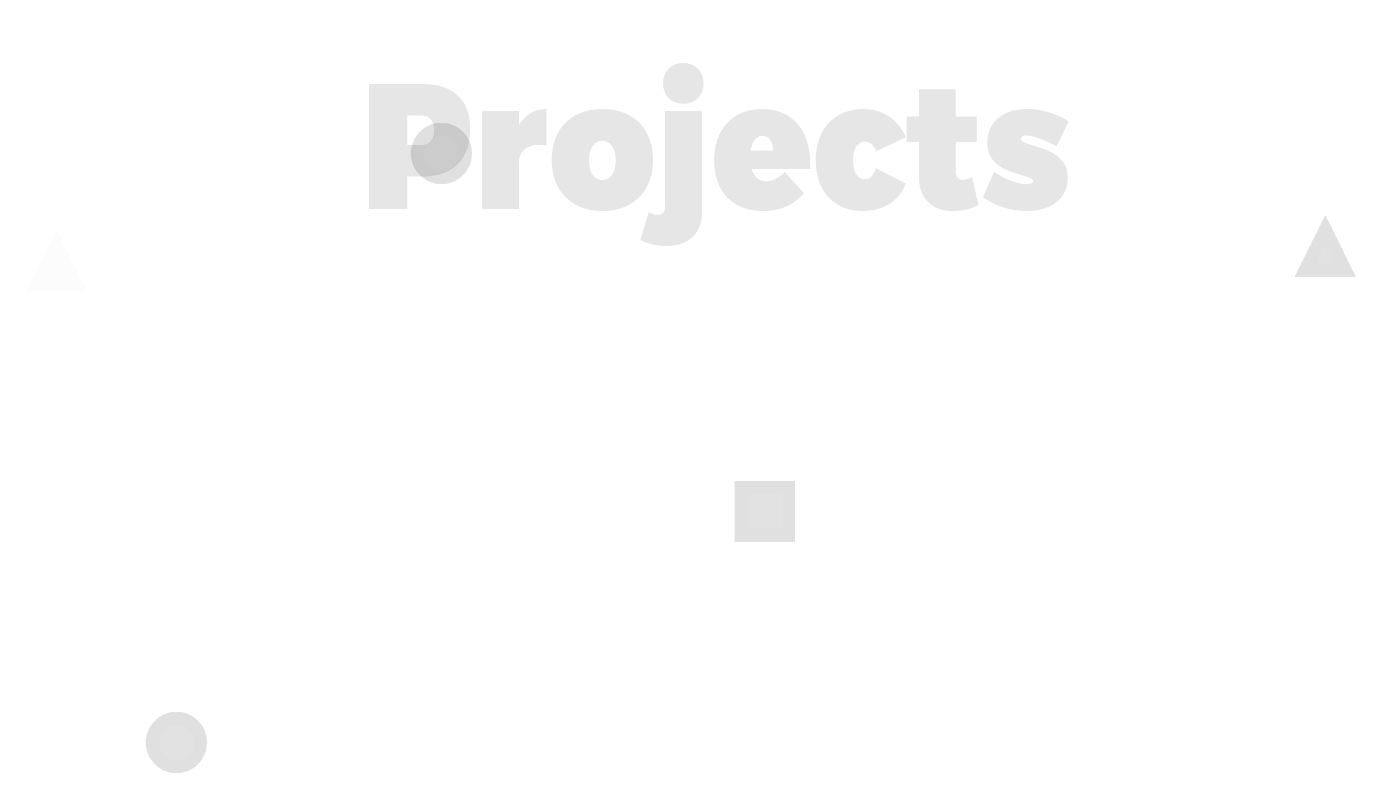
<style>
.page{position:relative;width:1400px;height:800px;background:#ffffff}
.page>*{position:absolute;margin:0}
.t1{font:179px "Montserrat-Black";color:#e6e6e6;scale:0.92 1}
</style>
<div class="page">
<p class="t1" style="left:369px;top:63px;width:700px;height:184px">Projects</p>
</div>
